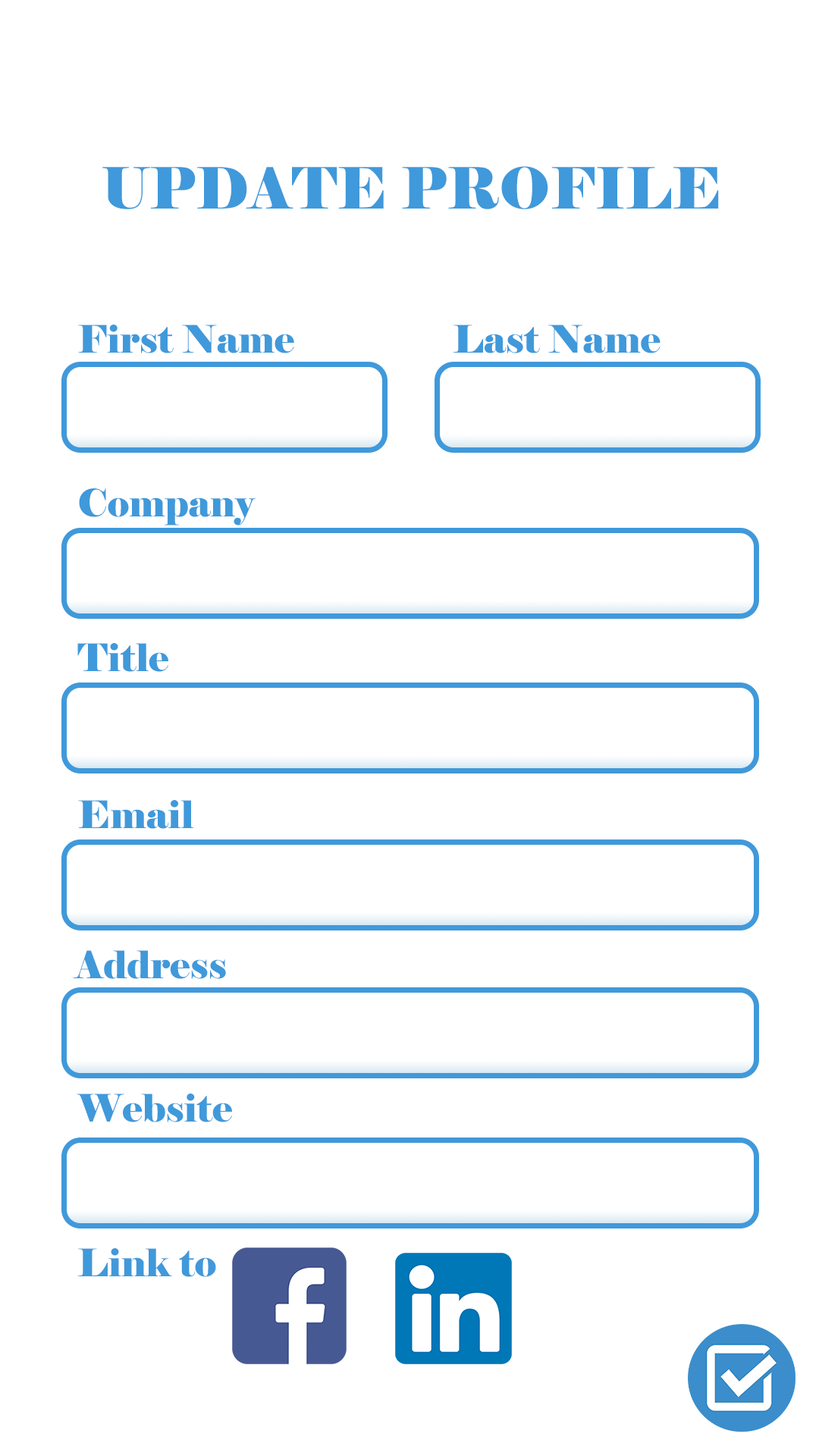
<style>
.page{position:relative;width:819px;height:1456px;background:#ffffff}
.page>*{position:absolute;margin:0}
.t1{font:56.9px "Elephant-Regular";color:#4099da}
.t2{font:37.9px "Elephant-Regular";color:#4099da}
</style>
<div class="page">
<p class="t1" style="left:102px;top:166px;width:617px;height:43px">UPDATE PROFILE</p>
<p class="t2" style="left:78px;top:325px;width:216px;height:28px">First Name</p>
<p class="t2" style="left:453px;top:325px;width:207px;height:28px">Last Name</p>
<p class="t2" style="left:79px;top:488px;width:177px;height:38px">Company</p>
<p class="t2" style="left:77px;top:643px;width:91px;height:29px">Title</p>
<p class="t2" style="left:78px;top:800px;width:116px;height:29px">Email</p>
<p class="t2" style="left:73px;top:950px;width:153px;height:29px">Address</p>
<p class="t2" style="left:77px;top:1094px;width:155px;height:28px">Website</p>
<p class="t2" style="left:77px;top:1248px;width:139px;height:29px">Link to</p>
</div>
